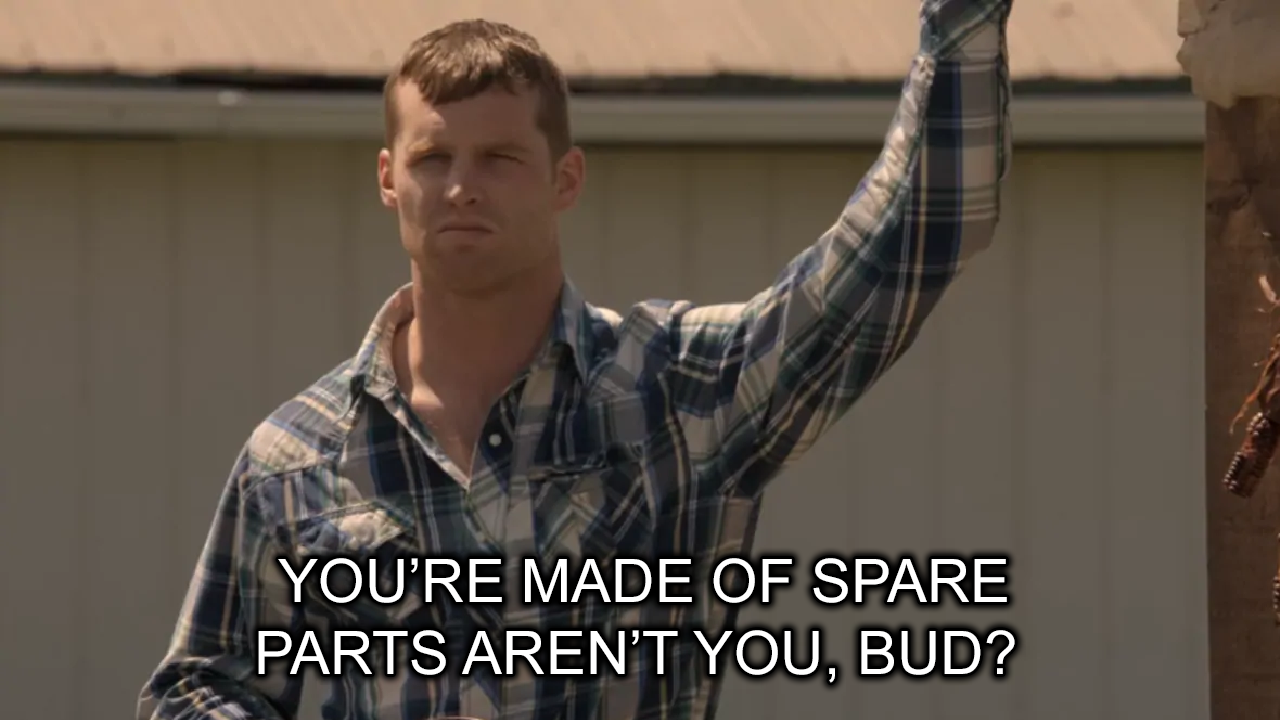
<style>
.page{position:relative;width:1280px;height:720px}
.page>*{position:absolute;margin:0}
.t1{font:60px "ArialMT";color:#ffffff}
</style>
<div class="page">
<p class="t1" style="left:258px;top:558px;width:757px;height:125px;text-align:center">YOU’RE MADE OF SPARE<br>PARTS AREN’T YOU, BUD?</p>
</div>
